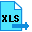
<style>
.page{position:relative;width:32px;height:32px;background:#50e6ff}
.page>*{position:absolute;margin:0}
.t1{font:9px "Arial-BoldMT";color:#000000;font-weight:bold}
</style>
<div class="page">
<p class="t1" style="left:2px;top:15px;width:17px;height:7px">XLS</p>
</div>
